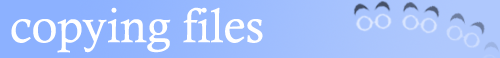
<style>
.page{position:relative;width:500px;height:58px}
.page>*{position:absolute;margin:0}
.t1{font:48px "CalistoMT";color:#ffffff}
</style>
<div class="page">
<p class="t1" style="left:11px;top:7px;width:252px;height:46px">copying files</p>
</div>
